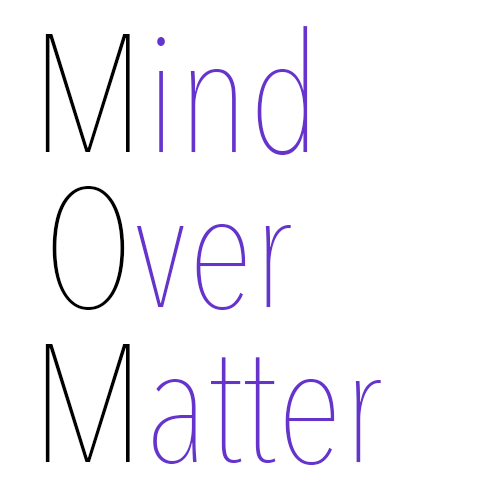
<style>
.page{position:relative;width:500px;height:500px;background:#ffffff}
.page>*{position:absolute;margin:0}
.t1{font:166.7px "AvenirNextCondensed-UltraLight";color:#6633cc}
.t2{font:166.7px "AvenirNextCondensed-UltraLight";color:#000000}
</style>
<div class="page">
<p class="t1" style="left:45px;top:26px;width:263px;height:129px"><span class="t2">M</span>ind</p>
<p class="t1" style="left:52px;top:186px;width:239px;height:124px"><span class="t2">O</span>ver</p>
<p class="t1" style="left:45px;top:344px;width:336px;height:121px"><span class="t2">M</span>atter</p>
</div>
